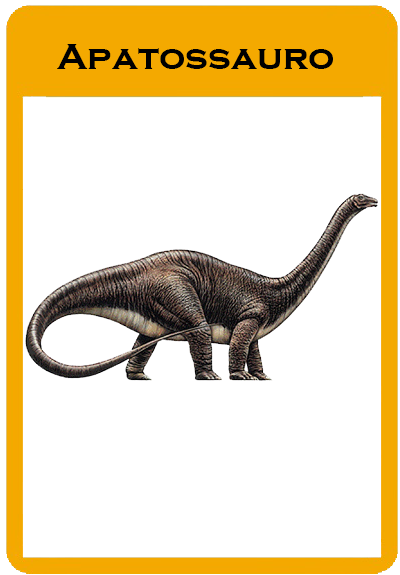
<style>
.page{position:relative;width:400px;height:575px;background:#ffffff}
.page>*{position:absolute;margin:0}
.t1{font:37.3px "CopperplateGothic-Bold";color:#000000}
</style>
<div class="page">
<p class="t1" style="left:57px;top:44px;width:276px;height:25px">Apatossauro</p>
</div>
